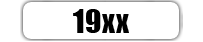
<style>
.page{position:relative;width:203px;height:42px;background:#ffffff}
.page>*{position:absolute;margin:0}
.t1{font:30px "Impact";letter-spacing:0.025em;color:#000000}
</style>
<div class="page">
<p class="t1" style="left:73px;top:9px;width:56px;height:24px">19xx</p>
</div>
